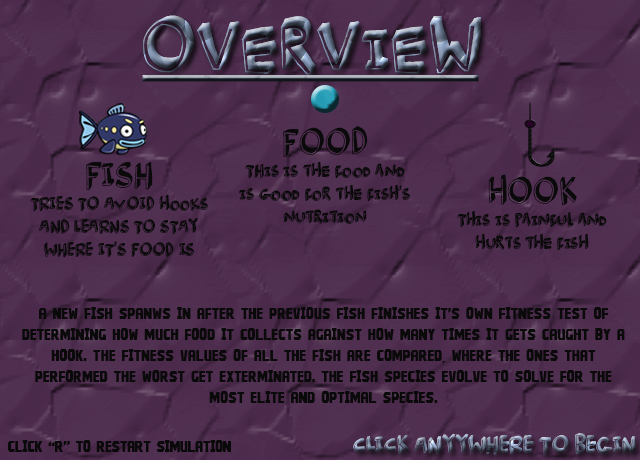
<style>
.page{position:relative;width:640px;height:460px}
.page>*{position:absolute;margin:0}
.t1{font:80.3px "BurgerFrogDEMO"}
.t2{font:19px "BurgerFrogDEMO";color:#0a0a0a}
.t3{font:37.9px "BurgerFrogDEMO";color:#0a0a0a}
.t4{font:17.4px "Kroftsmann";color:#0a0a0a}
.t5{font:25px "BurgerFrogDEMO"}
.t6{font:16.7px "Kroftsmann";color:#0a0a0a}
</style>
<div class="page">
<p class="t1" style="left:143px;top:15px;width:339px;height:60px">oVERVIEW</p>
<p class="t2" style="left:239px;top:126px;width:171px;height:98px;text-align:center"><span class="t3">food<br></span>thIS IS THE FOOD AND <br>IS GOOD FOR THE FISH’S<br>NUTRITION</p>
<p class="t2" style="left:30px;top:162px;width:178px;height:96px;text-align:center"><span class="t3">fish<br></span>tries to avoid HOOKS<br>and learns to stay<br>where it’s food is</p>
<p class="t2" style="left:457px;top:174px;width:150px;height:76px;text-align:center"><span class="t3">Hook<br></span>tHIS IS PAINFUL AND <br>HURTS THE FISH</p>
<p class="t4" style="left:22px;top:307px;width:603px;height:96px;text-align:center">A new fish spanws in after the previous fish finishes it’s own fitness test of determining how much food it collects against how many times it gets caught by a hook. The fitness values of all the fish are compared, where the ones that performed the worst get exterminated. the fish species evolve to solve for the most elite and optimal species.</p>
<p class="t5" style="left:353px;top:433px;width:283px;height:22px">click anyywhere to begin</p>
<p class="t6" style="left:8px;top:440px;width:223px;height:12px">click “r” to restart simulation</p>
</div>
